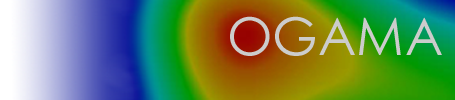
<style>
.page{position:relative;width:455px;height:100px}
.page>*{position:absolute;margin:0}
.t1{font:52.1px "CenturyGothic";color:#cccccc}
</style>
<div class="page">
<p class="t1" style="left:230px;top:16px;width:212px;height:40px">OGAMA</p>
</div>
